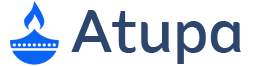
<style>
.page{position:relative;width:261px;height:66px;background:#ffffff}
.page>*{position:absolute;margin:0}
.t1{font:60px "AminoAlt-Regular5";color:#2c466e}
</style>
<div class="page">
<p class="t1" style="left:71px;top:10px;width:170px;height:54px">Atupa</p>
</div>
